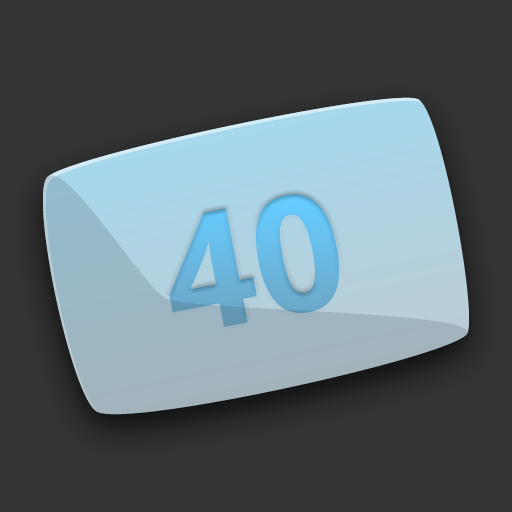
<style>
.page{position:relative;width:512px;height:512px;background:#333333}
.page>*{position:absolute;margin:0}
.t1{font:162px "DroidSans-Bold";color:#68b5dd}
</style>
<div class="page">
<p class="t1" style="left:169px;top:194px;width:170px;height:133px;rotate:-11deg">40</p>
</div>
